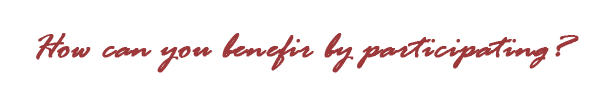
<style>
.page{position:relative;width:600px;height:100px;background:#ffffff}
.page>*{position:absolute;margin:0}
.t1{font:36px "RageItalic";color:#9c383a;font-weight:bold;font-style:italic}
</style>
<div class="page">
<p class="t1" style="left:36px;top:33px;width:543px;height:40px">How can you benefir by participating?</p>
</div>
